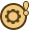
<style>
.page{position:relative;width:30px;height:30px;background:#ffffff}
.page>*{position:absolute;margin:0}
.t1{font:18px "CooperBlackStd";color:#f3c97f}
</style>
<div class="page">
<p class="t1" style="left:23px;top:2px;width:6px;height:13px">!</p>
</div>
